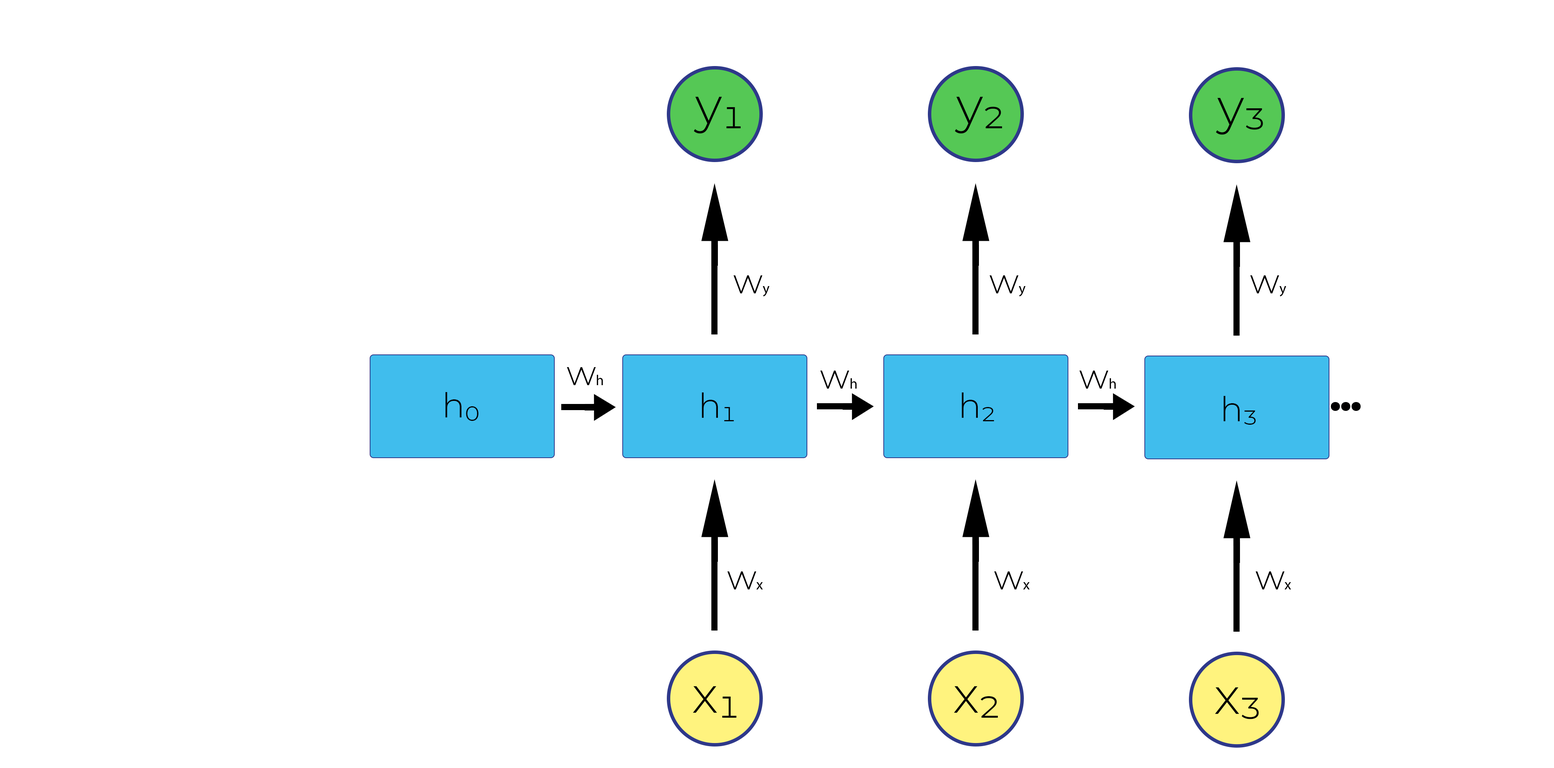
<style>
.page{position:relative;width:1554px;height:768px;background:#ffffff}
.page>*{position:absolute;margin:0}
.t1{font:50.7px "Montserrat-Light";color:#010000}
.t2{font:34.2px "Montserrat-Light";color:#010000}
.t3{font:14.6px "MyriadPro-Regular";color:#010000}
.t4{font:34.2px "Montserrat-Black";color:#010000}
</style>
<div class="page">
<p class="t1" style="left:693px;top:97px;width:48px;height:37px">y₁</p>
<p class="t1" style="left:954px;top:97px;width:48px;height:37px">y₂</p>
<p class="t1" style="left:1215px;top:98px;width:48px;height:37px">y₃</p>
<p class="t2" style="left:733px;top:275px;width:36px;height:21px">w<span class="t3">y</span></p>
<p class="t2" style="left:989px;top:275px;width:36px;height:21px">w<span class="t3">y</span></p>
<p class="t2" style="left:1250px;top:275px;width:36px;height:21px">w<span class="t3">y</span></p>
<p class="t2" style="left:566px;top:367px;width:37px;height:18px">w<span class="t3">h</span></p>
<p class="t2" style="left:820px;top:370px;width:37px;height:18px">w<span class="t3">h</span></p>
<p class="t2" style="left:1079px;top:370px;width:37px;height:18px">w<span class="t3">h</span></p>
<p class="t2" style="left:445px;top:392px;width:34px;height:29px">h₀</p>
<p class="t2" style="left:702px;top:392px;width:32px;height:29px">h₁</p>
<p class="t2" style="left:961px;top:392px;width:33px;height:29px">h₂</p>
<p class="t2" style="left:1223px;top:396px;width:32px;height:28px">h₃</p>
<p class="t4" style="left:1330px;top:402px;width:30px;height:9px">...</p>
<p class="t2" style="left:727px;top:571px;width:36px;height:18px">w<span class="t3">x</span></p>
<p class="t2" style="left:994px;top:571px;width:35px;height:18px">w<span class="t3">x</span></p>
<p class="t2" style="left:1255px;top:571px;width:36px;height:18px">w<span class="t3">x</span></p>
<p class="t1" style="left:693px;top:686px;width:43px;height:31px">x₁</p>
<p class="t1" style="left:954px;top:686px;width:44px;height:31px">x₂</p>
<p class="t1" style="left:1215px;top:687px;width:43px;height:32px">x₃</p>
</div>
